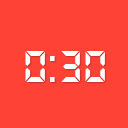
<style>
.page{position:relative;width:128px;height:128px;background:#ff4136}
.page>*{position:absolute;margin:0}
.t1{font:48px "DS-Digital-Bold";color:#ffffff}
</style>
<div class="page">
<p class="t1" style="left:25px;top:51px;width:80px;height:31px">0:30</p>
</div>
